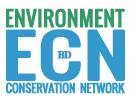
<style>
.page{position:relative;width:136px;height:100px;background:#ffffff}
.page>*{position:absolute;margin:0}
.t1{font:20.4px "Oswald-Regular";color:#339966;font-weight:bold}
.t2{font:56.3px "Oswald-Regular";color:#3399cc;font-weight:bold;scale:1.43 1}
.t3{font:10.7px "TimesNewRomanPS-BoldMT";letter-spacing:-0.11em;color:#3399cc;font-weight:bold}
.t4{font:11.6px "Oswald-Regular";letter-spacing:-0.03em;color:#3399cc;font-weight:bold}
</style>
<div class="page">
<p class="t1" style="left:6px;top:8px;width:119px;height:20px">ENVIRONMENT</p>
<p class="t2" style="left:6px;top:29px;width:119px;height:53px">ECN</p>
<p class="t3" style="left:57px;top:51px;width:15px;height:8px">BD</p>
<p class="t4" style="left:6px;top:82px;width:119px;height:12px">CONSERVATION  NETWORK</p>
</div>
